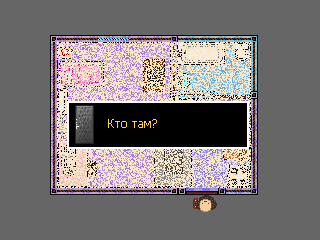
<style>
.page{position:relative;width:320px;height:240px;background:#666666}
.page>*{position:absolute;margin:0}
.t1{font:12px "Tahoma";color:#ffcd59}
</style>
<div class="page">
<p class="t1" style="left:108px;top:119px;width:49px;height:9px">Кто там?</p>
</div>
